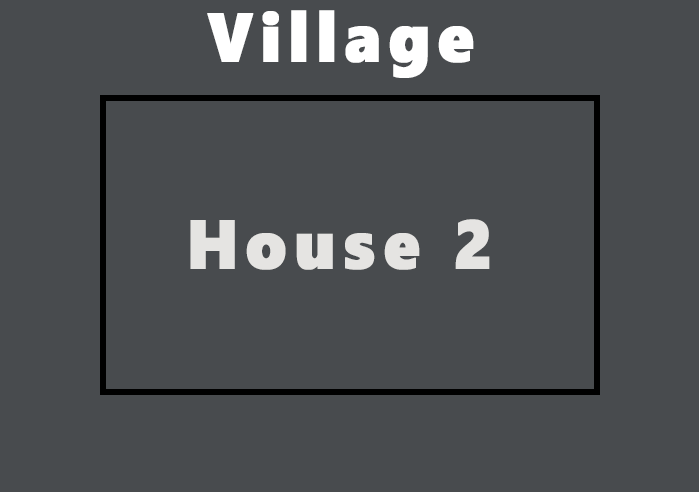
<style>
.page{position:relative;width:699px;height:492px;background:#484b4e}
.page>*{position:absolute;margin:0}
.t1{font:68.5px "SegoeWP-Black";letter-spacing:0.1em;color:#ffffff;font-weight:bold;scale:0.93 1}
.t2{font:68.5px "SegoeWP-Black";letter-spacing:0.1em;color:#e5e4e2;font-weight:bold;scale:0.93 1}
</style>
<div class="page">
<p class="t1" style="left:207px;top:10px;width:267px;height:68px">Village</p>
<p class="t2" style="left:190px;top:219px;width:300px;height:51px">House 2</p>
</div>
